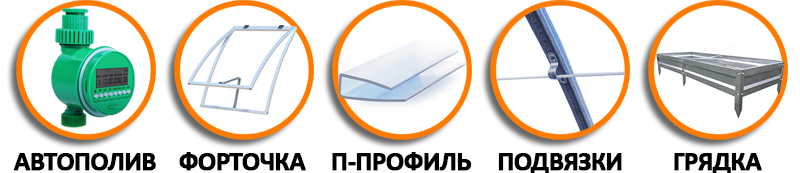
<style>
.page{position:relative;width:800px;height:173px;background:#ffffff}
.page>*{position:absolute;margin:0}
.t1{font:27.3px "Calibri-Bold";letter-spacing:-0.05em;color:#000000;font-weight:bold}
</style>
<div class="page">
<p class="t1" style="left:13px;top:153px;width:143px;height:18px">АВТОПОЛИВ</p>
<p class="t1" style="left:179px;top:152px;width:127px;height:19px">ФОРТОЧКА</p>
<p class="t1" style="left:332px;top:152px;width:140px;height:19px">П-ПРОФИЛЬ</p>
</div>
